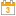
<style>
.page{position:relative;width:16px;height:16px;background:#ffffff}
.page>*{position:absolute;margin:0}
.t1{font:7.6px "Arial-BoldMT";color:#ffa500;scale:0.95 1}
</style>
<div class="page">
<p class="t1" style="left:6px;top:7px;width:4px;height:6px">3</p>
</div>
